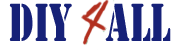
<style>
.page{position:relative;width:180px;height:50px;background:#ffffff}
.page>*{position:absolute;margin:0}
.t1{font:49.8px "StencilStd";color:#162178;scale:0.68 1}
</style>
<div class="page">
<p class="t1" style="left:9px;top:3px;width:162px;height:38px">DIY   ALL</p>
</div>
